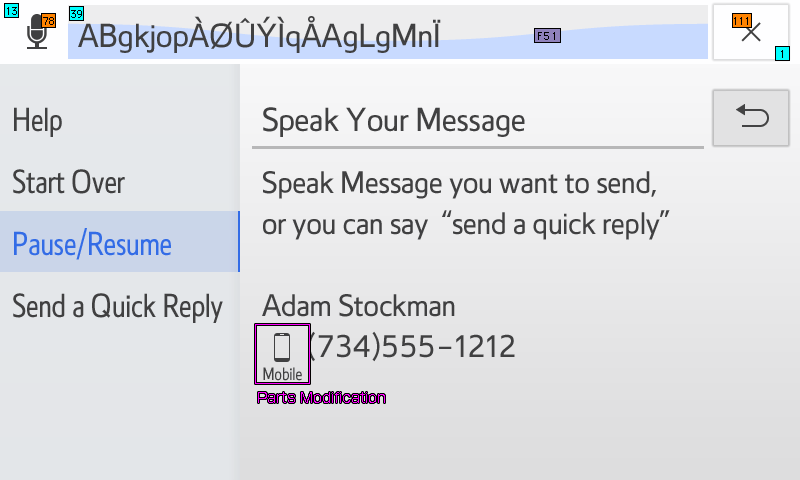
<style>
.page{position:relative;width:800px;height:480px}
.page>*{position:absolute;margin:0}
.t1{font:30px "Tfont1502_T1S";color:#404041}
.t2{font:30px "Tfont1502_T2S";color:#404041}
.t3{font:30px "Tfont1502_T1S";color:#404040}
.t4{font:28px/41px "Tfont1502_T1S";color:#404040}
.t5{font:30px "Tfont1502_T2S";color:#336ce6}
.t6{font:28px "Tfont1502_T1S";color:#404040}
.t7{font:16px "Tfont1502_T2S";color:#404040}
.t8{font:14px "ShinGoPro-Regular";color:#ff00ff}
</style>
<div class="page">
<p class="t1" style="left:78px;top:16px;width:363px;height:37px">ABgkjopÀØÛÝÌqÅAgLgMnÏ</p>
<p class="t2" style="left:14px;top:107px;width:48px;height:30px">Help</p>
<p class="t3" style="left:263px;top:107px;width:262px;height:30px">Speak Your Message</p>
<p class="t2" style="left:13px;top:169px;width:112px;height:25px">Start Over</p>
<p class="t4" style="left:262px;top:171px;width:408px;height:146px">Speak Message you want to send,<br>or you can say  “send a quick reply”<br><br>Adam Stockman</p>
<p class="t5" style="left:14px;top:228px;width:157px;height:32px">Pause/Resume</p>
<p class="t2" style="left:13px;top:293px;width:210px;height:30px">Send a Quick Reply</p>
<p class="t6" style="left:308px;top:331px;width:207px;height:31px">(734)555-1212</p>
<p class="t7" style="left:263px;top:367px;width:39px;height:14px">Mobile</p>
<p class="t8" style="left:258px;top:392px;width:127px;height:11px">Parts Modification</p>
</div>
